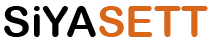
<style>
.page{position:relative;width:210px;height:42px;background:#ffffff}
.page>*{position:absolute;margin:0}
.t1{font:42.7px "ArialRoundedMTBold";color:#010101}
.t2{font:42.7px "ArialRoundedMTBold";color:#d8671c}
</style>
<div class="page">
<p class="t1" style="left:4px;top:6px;width:204px;height:31px">SiYA<span class="t2">SETT</span></p>
</div>
